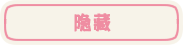
<style>
.page{position:relative;width:183px;height:45px;background:#f7f3e9}
.page>*{position:absolute;margin:0}
.t1{font:12px "shetumodengxiaofangti";color:#ef8da2;font-weight:bold;scale:0.94 1}
</style>
<div class="page">
<p class="t1" style="left:74px;top:13px;width:37px;height:19px">隐藏</p>
</div>
